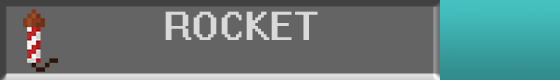
<style>
.page{position:relative;width:560px;height:80px;background:#646464}
.page>*{position:absolute;margin:0}
.t1{font:36px "System";color:#d9d9d9}
</style>
<div class="page">
<p class="t1" style="left:165px;top:11px;width:153px;height:29px">ROCKET</p>
</div>
